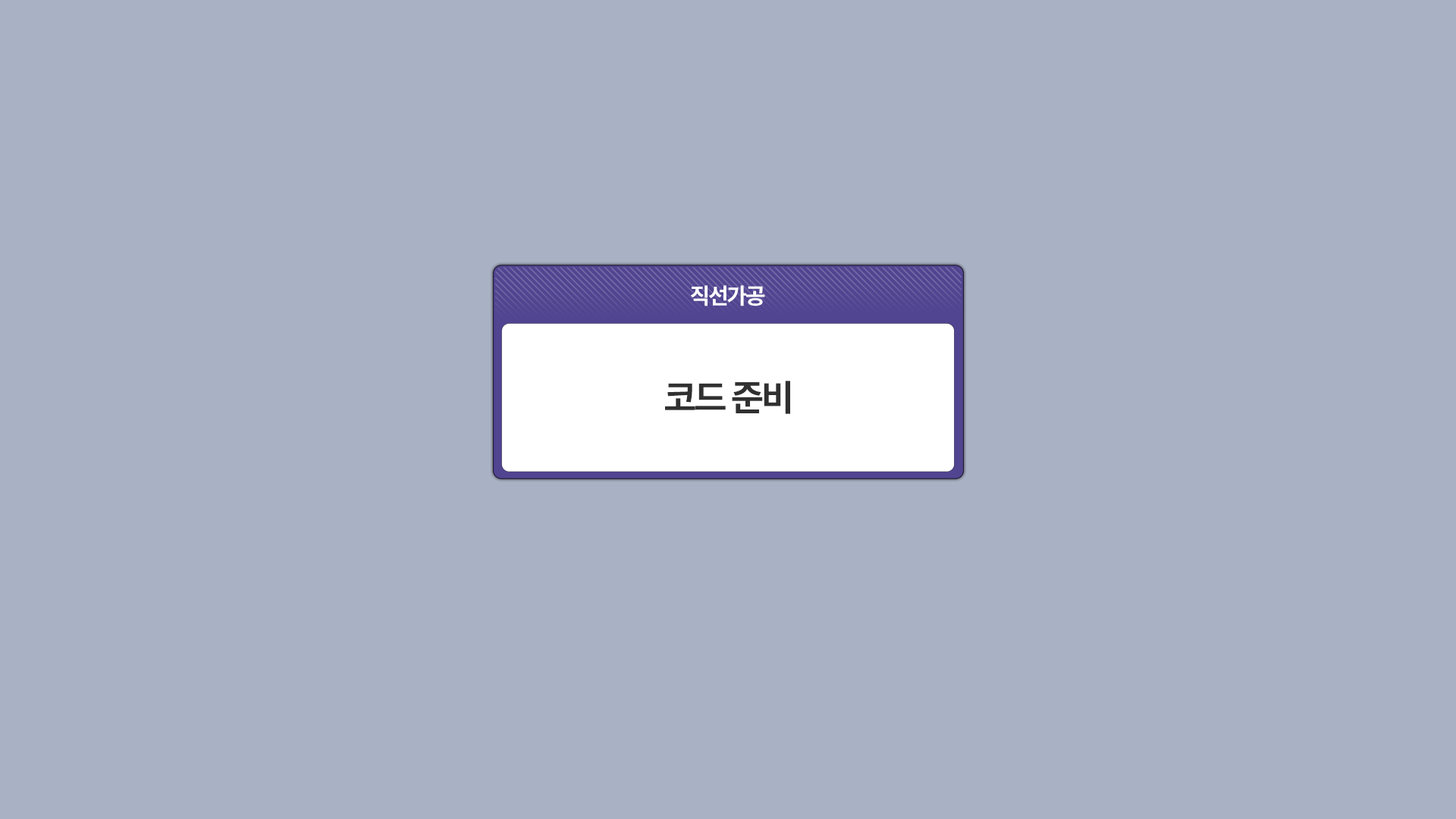
<style>
.page{position:relative;width:1456px;height:819px;background:#a9b2c4}
.page>*{position:absolute;margin:0}
.t1{font:22.7px "Pretendard-Bold";letter-spacing:-0.05em;color:#ffffff;text-transform:uppercase}
.t2{font:37.1px "Pretendard-Bold";letter-spacing:-0.05em;color:#303030;text-transform:uppercase}
</style>
<div class="page">
<p class="t1" style="left:691px;top:285px;width:74px;height:21px">직선가공</p>
<p class="t2" style="left:665px;top:381px;width:125px;height:33px">코드 준비</p>
</div>
